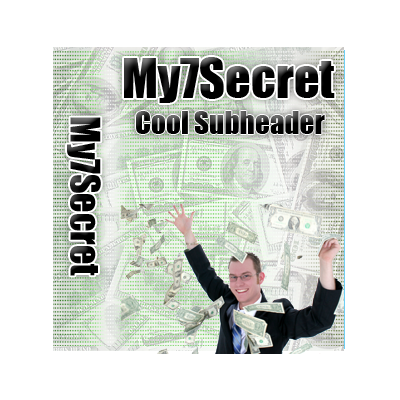
<style>
.page{position:relative;width:400px;height:400px;background:#ffffff}
.page>*{position:absolute;margin:0}
.t1{font:50px "Impact";color:#000000}
.t2{font:29.2px "Impact";color:#000000}
.t3{font:37.5px "Impact";color:#000000}
</style>
<div class="page">
<p class="t1" style="left:124px;top:57px;width:211px;height:46px">My7Secret</p>
<p class="t2" style="left:136px;top:111px;width:189px;height:23px">Cool Subheader</p>
<p class="t3" style="left:67px;top:117px;width:34px;height:159px;rotate:90deg">My7Secret</p>
</div>
